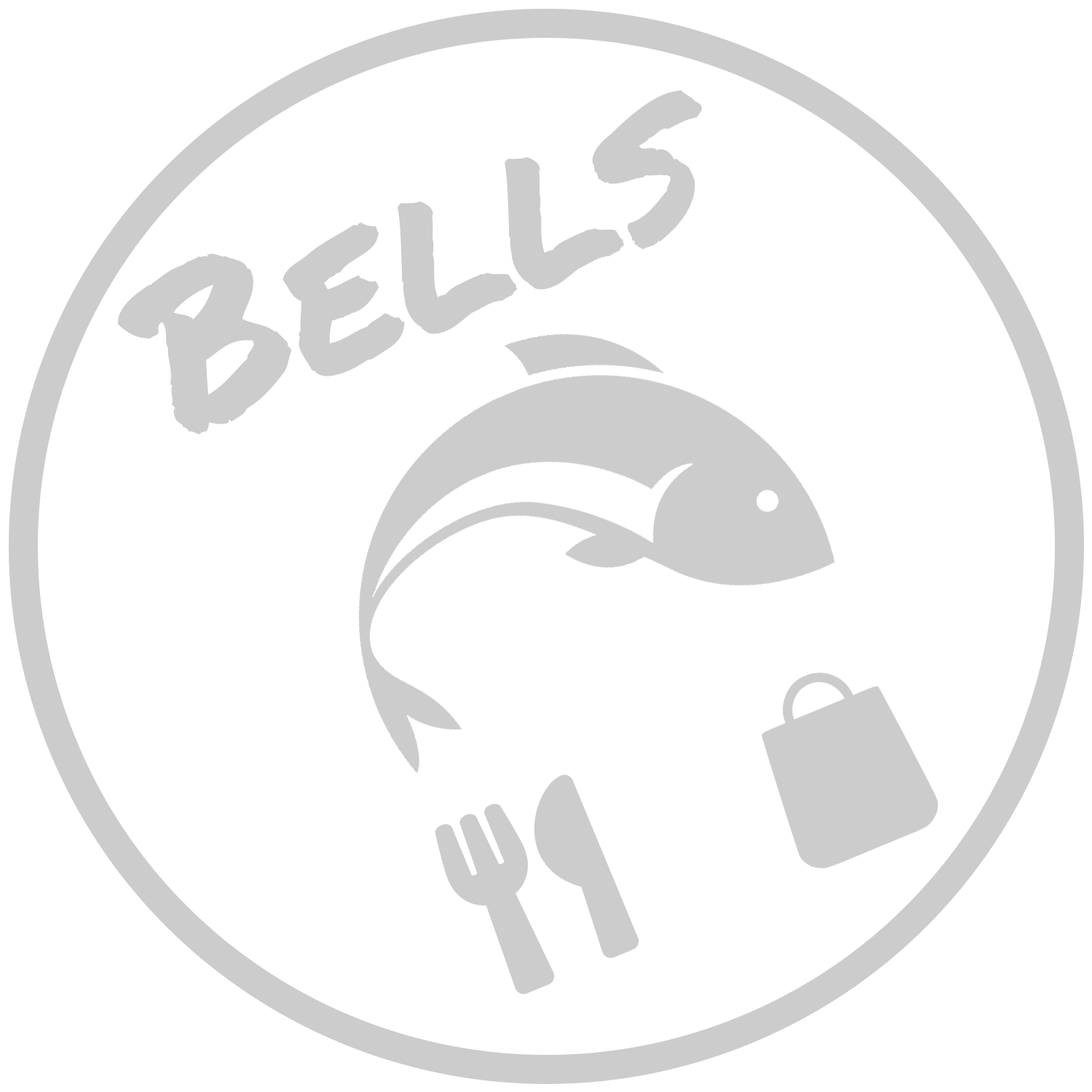
<style>
.page{position:relative;width:1092px;height:1092px;background:#ffffff}
.page>*{position:absolute;margin:0}
.t1{font:218.4px "PermanentMarker-Regular";color:#c0c0c0}
</style>
<div class="page">
<p class="t1" style="left:117px;top:90px;width:586px;height:345px;rotate:-23deg">Bells</p>
</div>
